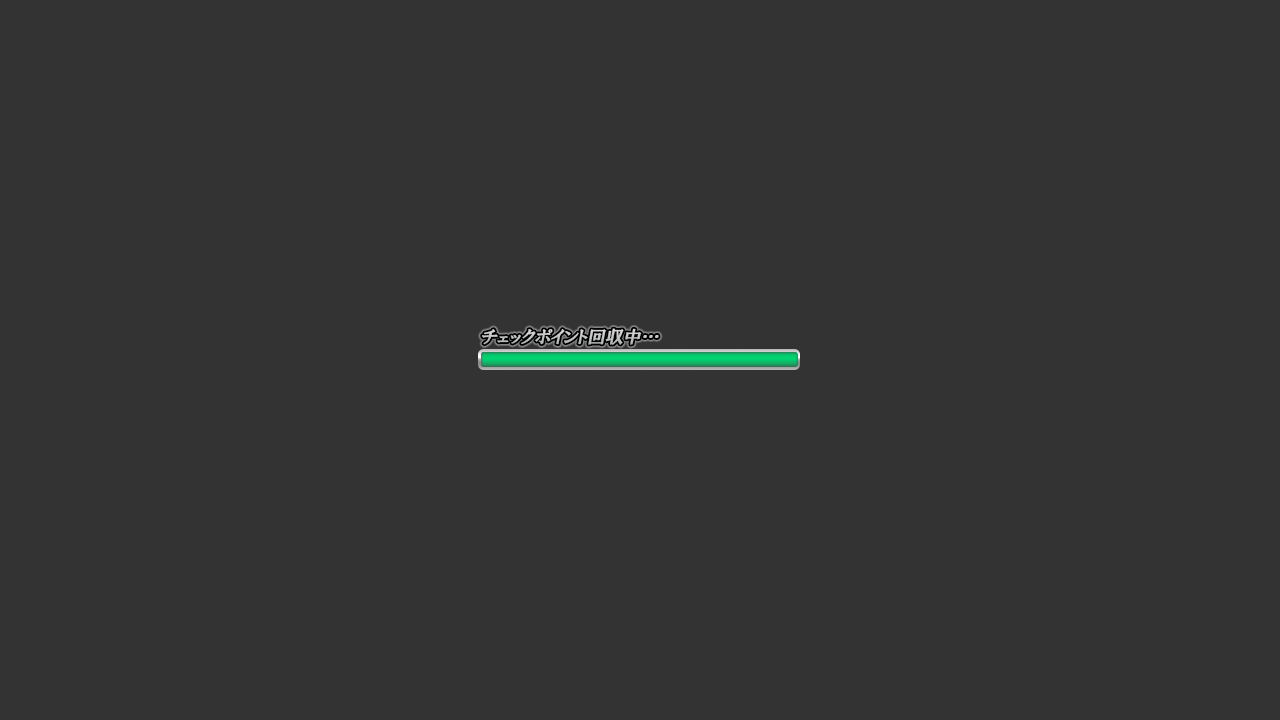
<style>
.page{position:relative;width:1280px;height:720px;background:#333333}
.page>*{position:absolute;margin:0}
.t1{font:17.4px "HGPSoeiPresenceEB";letter-spacing:-0.025em;color:#c6c8c7;font-style:italic;scale:1.06 1}
</style>
<div class="page">
<p class="t1" style="left:482px;top:328px;width:177px;height:17px">チェックポイント回収中…</p>
</div>
